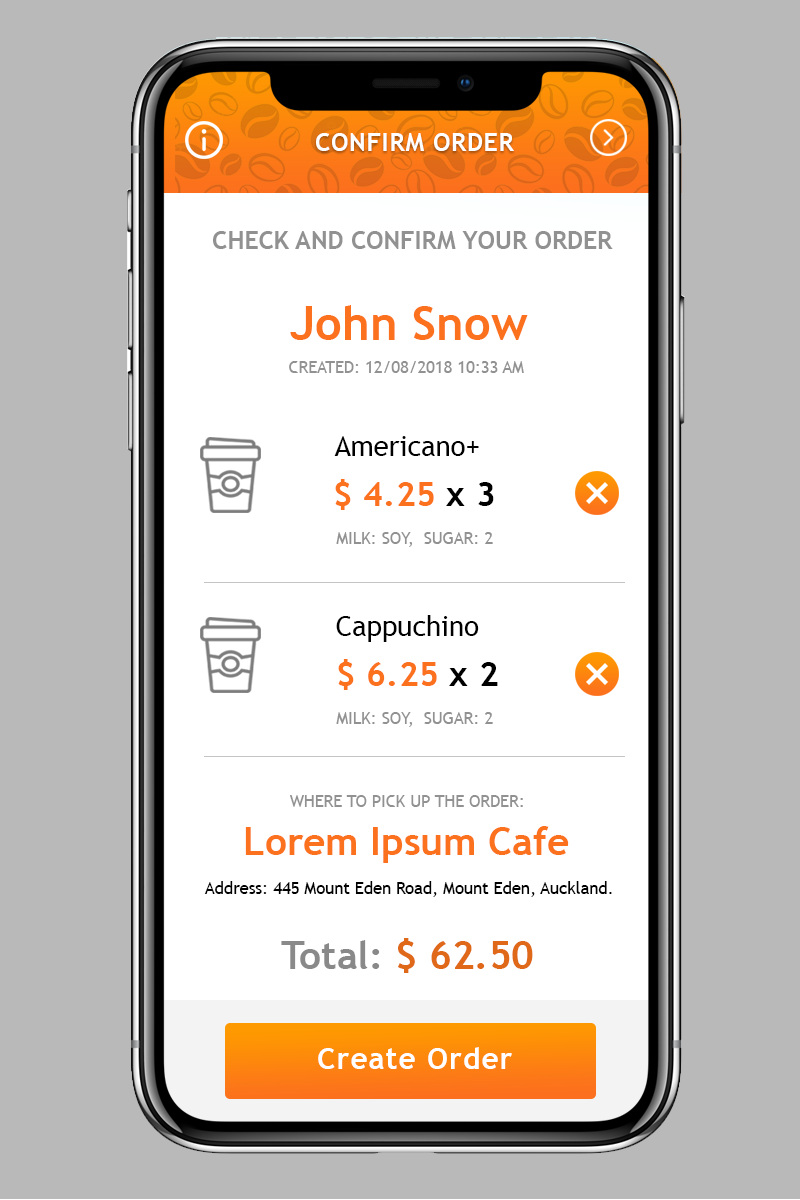
<style>
.page{position:relative;width:800px;height:1200px;background:#ffffff}
.page>*{position:absolute;margin:0}
.t1{font:24.8px "TrebuchetMS-Bold";letter-spacing:0.03em;color:#ffffff;text-transform:uppercase}
.t2{font:24.8px "TrebuchetMS-Bold";color:#919191;text-transform:uppercase}
.t3{font:47.2px "TrebuchetMS-Bold";color:#fc711d}
.t4{font:16.6px "TrebuchetMS";color:#919191;text-transform:uppercase}
.t5{font:27.7px "TrebuchetMS";color:#000000}
.t6{font:34.3px "TrebuchetMS-Bold";color:#fc711d}
.t7{font:34.3px "TrebuchetMS-Bold";color:#000000}
.t8{font:38.7px "TrebuchetMS-Bold";color:#fc711d}
.t9{font:16.6px "TrebuchetMS";color:#000000}
.t10{font:38.7px "TrebuchetMS-Bold";color:#df6819}
.t11{font:38.7px "TrebuchetMS-Bold";color:#898989}
.t12{font:30.3px "TrebuchetMS-Bold";letter-spacing:0.03em;color:#ffffff}
</style>
<div class="page">
<p class="t1" style="left:316px;top:133px;width:198px;height:18px">confirm order</p>
<p class="t2" style="left:213px;top:231px;width:400px;height:18px">check and confirm your order</p>
<p class="t3" style="left:290px;top:305px;width:238px;height:35px">John Snow</p>
<p class="t4" style="left:289px;top:361px;width:235px;height:12px">created: 12/08/2018 10:33 am</p>
<p class="t5" style="left:334px;top:436px;width:145px;height:20px">Americano+</p>
<p class="t6" style="left:335px;top:479px;width:159px;height:31px">$ 4.25 <span class="t7">x 3</span></p>
<p class="t4" style="left:336px;top:532px;width:157px;height:15px">milk: soy,  sugar: 2</p>
<p class="t5" style="left:336px;top:615px;width:143px;height:27px">Cappuchino</p>
<p class="t6" style="left:338px;top:659px;width:160px;height:31px">$ 6.25 <span class="t7">x 2</span></p>
<p class="t4" style="left:336px;top:712px;width:157px;height:15px">milk: soy,  sugar: 2</p>
<p class="t4" style="left:290px;top:795px;width:233px;height:12px">Where to pick up the order:</p>
<p class="t8" style="left:245px;top:826px;width:324px;height:37px">Lorem Ipsum Cafe</p>
<p class="t9" style="left:204px;top:881px;width:408px;height:16px">Address: 445 Mount Eden Road, Mount Eden, Auckland.</p>
<p class="t10" style="left:281px;top:938px;width:252px;height:35px"><span class="t11">Total: </span>$ 62.50</p>
<p class="t12" style="left:318px;top:1047px;width:194px;height:22px">Create Order</p>
</div>
